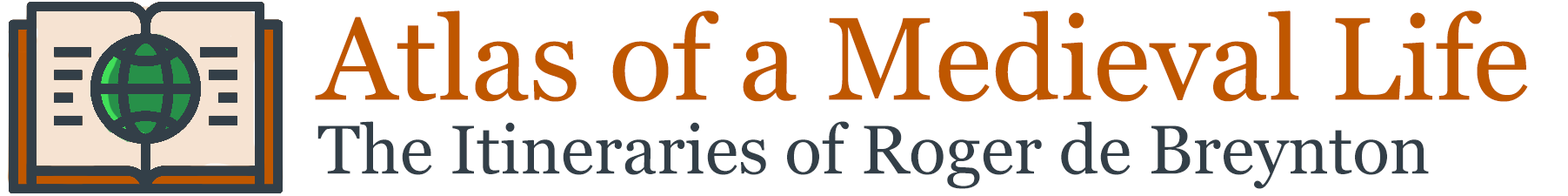
<style>
.page{position:relative;width:1568px;height:196px;background:#ffffff}
.page>*{position:absolute;margin:0}
.t1{font:117.4px "Georgia";color:#bf5700}
.t2{font:68.7px "Georgia";color:#333f48}
</style>
<div class="page">
<p class="t1" style="left:315px;top:10px;width:1213px;height:92px">Atlas of a Medieval Life</p>
<p class="t2" style="left:317px;top:121px;width:1112px;height:68px">The Itineraries of Roger de Breynton</p>
</div>
